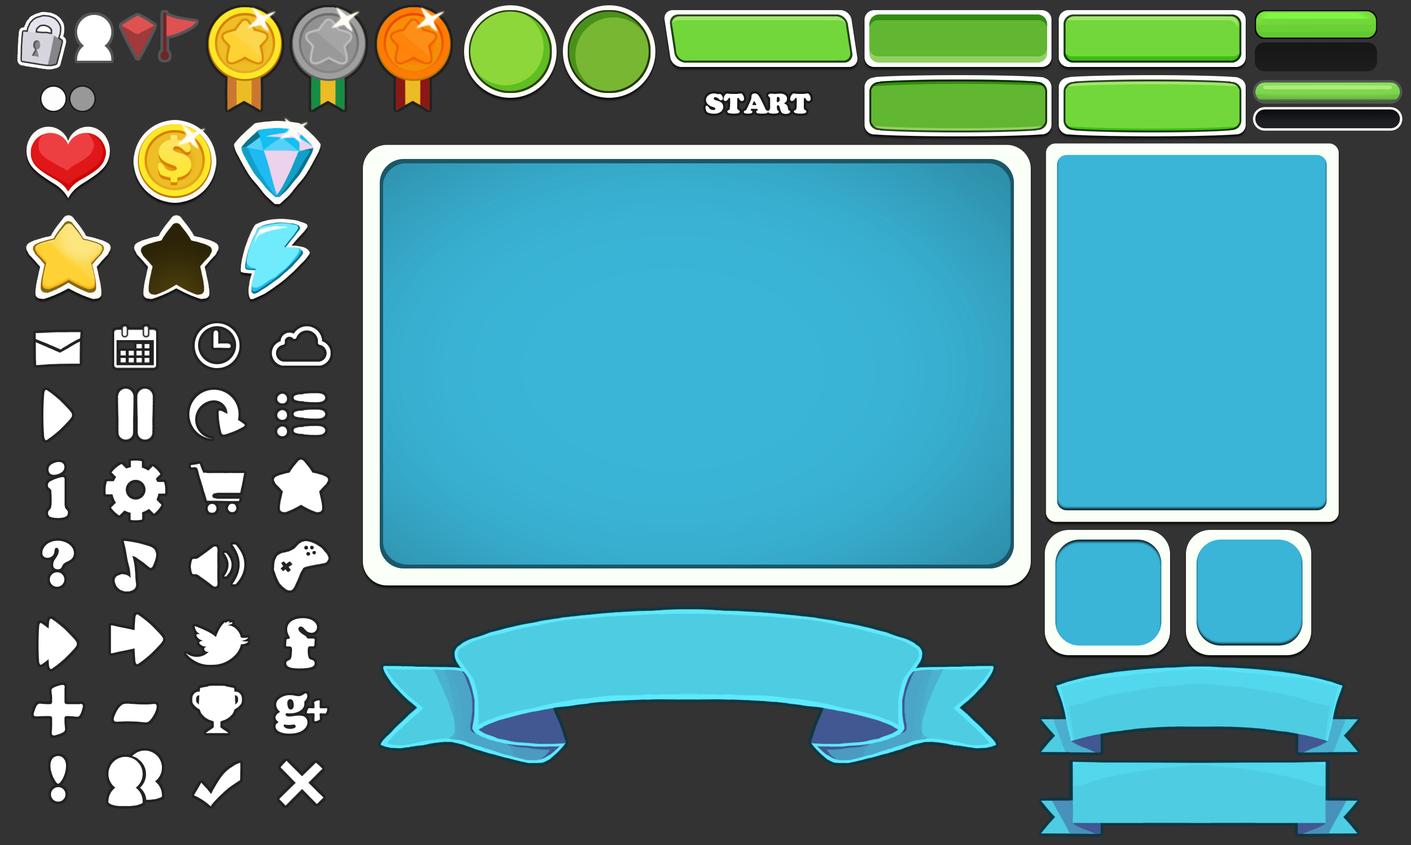
<style>
.page{position:relative;width:1411px;height:845px;background:#333333}
.page>*{position:absolute;margin:0}
.t1{font:28.9px "CooperBlack";color:#ffffff}
.t2{font:82.6px "CooperBlack";color:#ffffff;scale:0.71 1}
.t3{font:67.5px "CooperBlack";color:#ffffff}
.t4{font:73.4px "CooperBlack";letter-spacing:0.025em;color:#ffffff}
.t5{font:102.2px "CooperBlack";letter-spacing:0.025em;color:#ffffff}
.t6{font:102.2px "CooperBlack";letter-spacing:0.025em;color:#ffffff;scale:1.47 1}
</style>
<div class="page">
<p class="t1" style="left:705px;top:93px;width:106px;height:21px">START</p>
<p class="t2" style="left:48px;top:462px;width:20px;height:56px">i</p>
<p class="t3" style="left:42px;top:541px;width:32px;height:46px">?</p>
<p class="t4" style="left:286px;top:618px;width:31px;height:51px">f</p>
<p class="t5" style="left:33px;top:685px;width:50px;height:51px">+</p>
<p class="t6" style="left:114px;top:704px;width:43px;height:19px">-</p>
<p class="t3" style="left:50px;top:756px;width:16px;height:46px">!</p>
</div>
